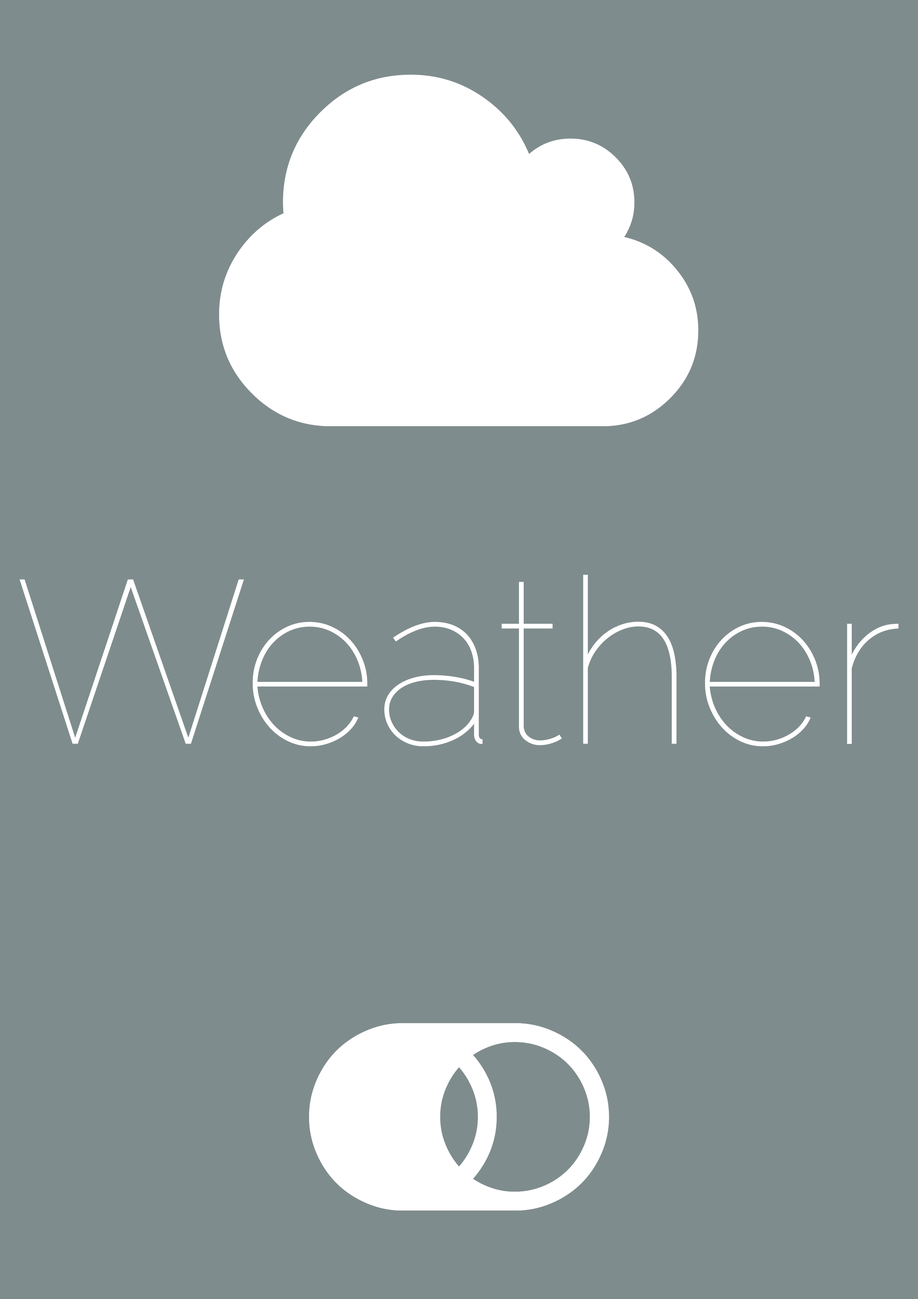
<style>
.page{position:relative;width:918px;height:1299px;background:#7f8c8d}
.page>*{position:absolute;margin:0}
.t1{font:231.4px "Raleway-Thin";color:#ffffff}
</style>
<div class="page">
<p class="t1" style="left:20px;top:575px;width:879px;height:171px">Weather</p>
</div>
